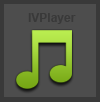
<style>
.page{position:relative;width:100px;height:102px;background:#4d4d4d}
.page>*{position:absolute;margin:0}
.t1{font:12px "Arial-BoldMT";color:#393939}
</style>
<div class="page">
<p class="t1" style="left:28px;top:13px;width:48px;height:11px">IVPlayer</p>
</div>
